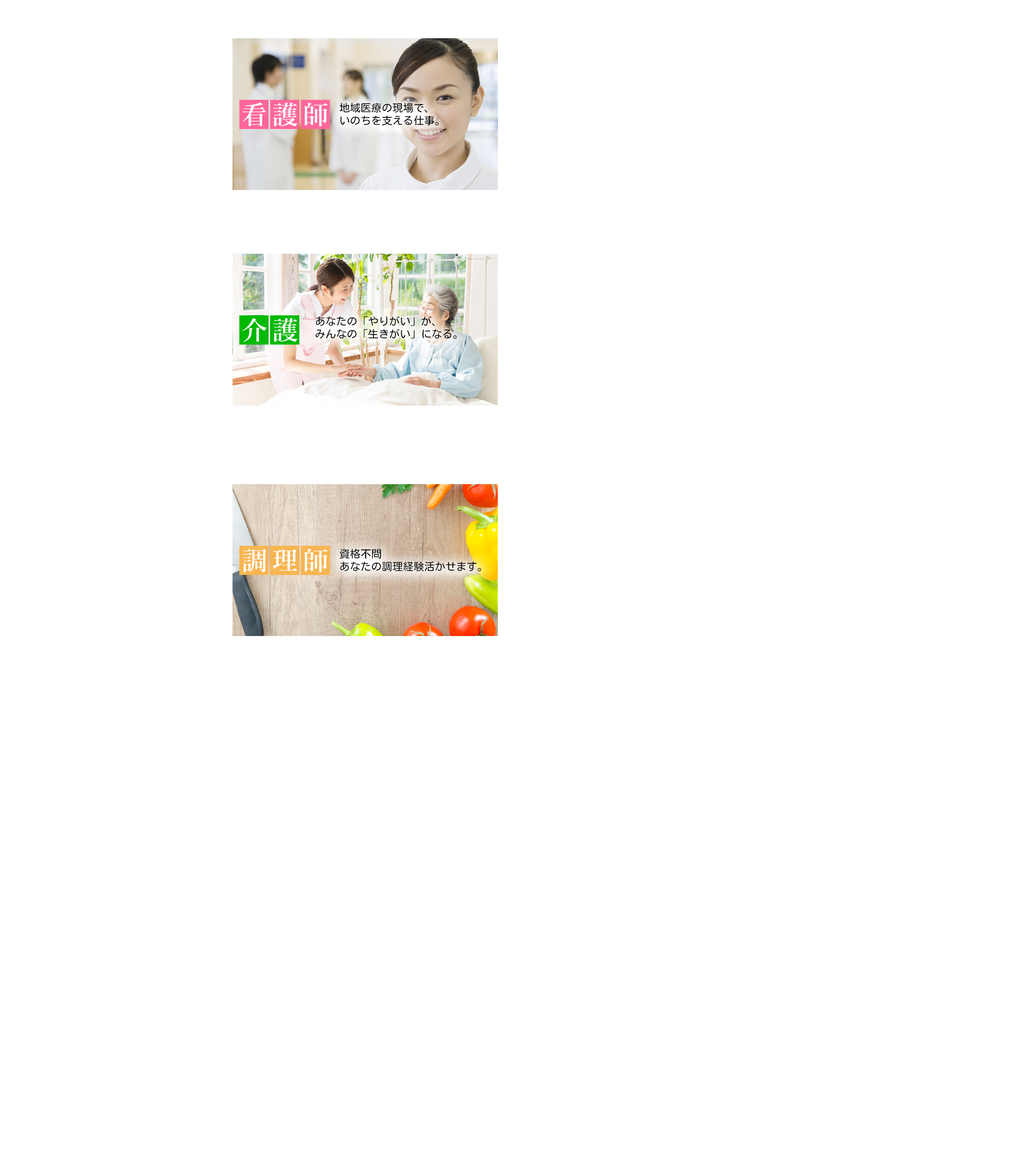
<style>
.page{position:relative;width:1036px;height:1151px;background:#ffffff}
.page>*{position:absolute;margin:0}
.t1{font:25.5px "YuMincho-Demibold";letter-spacing:0.2em;color:#ffffff}
.t2{font:10.6px "MotoyaLMaru-W3-90ms-RKSJ-H";color:#000000}
</style>
<div class="page">
<p class="t1" style="left:243px;top:102px;width:85px;height:24px">看護師</p>
<p class="t2" style="left:340px;top:102px;width:99px;height:23px">地域医療の現場で、<br>いのちを支える仕事。</p>
<p class="t1" style="left:242px;top:318px;width:56px;height:24px">介護</p>
<p class="t2" style="left:315px;top:316px;width:142px;height:23px">あなたの「やりがい」が、<br>みんなの「生きがい」になる。</p>
<p class="t1" style="left:243px;top:548px;width:85px;height:24px">調理師</p>
<p class="t2" style="left:340px;top:548px;width:141px;height:23px">資格不問<br>あなたの調理経験活かせます。</p>
</div>
